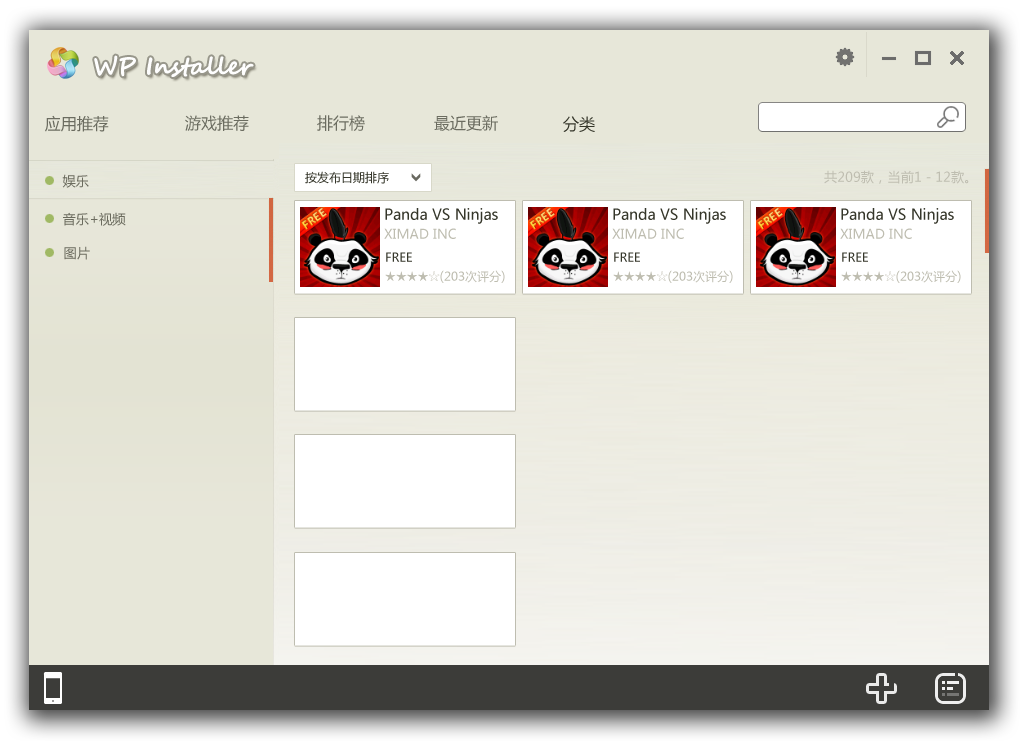
<style>
.page{position:relative;width:1024px;height:741px}
.page>*{position:absolute;margin:0}
.t1{font:24px "SegoeScript-Bold";color:#fefefe}
.t2{font:16px "MicrosoftYaHei";color:#6b6c60}
.t3{font:16px "MicrosoftYaHei";color:#35362a}
.t4{font:13.3px "MicrosoftYaHei";color:#6b6b5e}
.t5{font:12px "MicrosoftYaHei";color:#35362a}
.t6{font:13.3px "MicrosoftYaHei";color:#bebdb0}
.t7{font:14.7px "MicrosoftYaHei";color:#35362a}
.t8{font:12px "MicrosoftYaHei";color:#bebdb0}
</style>
<div class="page">
<p class="t1" style="left:94px;top:55px;width:160px;height:22px">WP Installer</p>
<p class="t2" style="left:45px;top:115px;width:64px;height:17px">应用推荐</p>
<p class="t2" style="left:185px;top:115px;width:64px;height:16px">游戏推荐</p>
<p class="t2" style="left:317px;top:115px;width:48px;height:16px">排行榜</p>
<p class="t2" style="left:434px;top:115px;width:64px;height:16px">最近更新</p>
<p class="t3" style="left:563px;top:116px;width:32px;height:16px">分类</p>
<p class="t4" style="left:62px;top:174px;width:27px;height:14px">娱乐</p>
<p class="t5" style="left:305px;top:171px;width:84px;height:13px">按发布日期排序</p>
<p class="t6" style="left:824px;top:170px;width:145px;height:14px">共209款，当前1－12款。</p>
<p class="t7" style="left:385px;top:208px;width:113px;height:16px">Panda VS Ninjas</p>
<p class="t4" style="left:63px;top:212px;width:63px;height:14px">音乐+视频</p>
<p class="t6" style="left:384px;top:228px;width:72px;height:11px">XIMAD INC</p>
<p class="t4" style="left:64px;top:246px;width:26px;height:14px">图片</p>
<p class="t5" style="left:386px;top:252px;width:26px;height:10px">FREE</p>
<p class="t6" style="left:385px;top:270px;width:120px;height:13px">★★★★☆(<span class="t8">203次评分</span>)</p>
</div>
